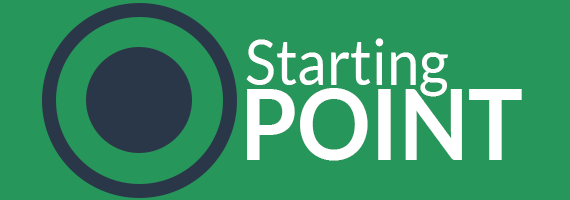
<style>
.page{position:relative;width:570px;height:200px;background:#27965a}
.page>*{position:absolute;margin:0}
.t1{font:62.6px "Lato-Regular";color:#ffffff;scale:0.93 1}
.t2{font:98.4px "Lato-Bold";color:#ffffff;text-transform:uppercase;scale:0.93 1}
</style>
<div class="page">
<p class="t1" style="left:246px;top:38px;width:202px;height:59px">Starting</p>
<p class="t2" style="left:247px;top:88px;width:275px;height:73px">Point</p>
</div>
